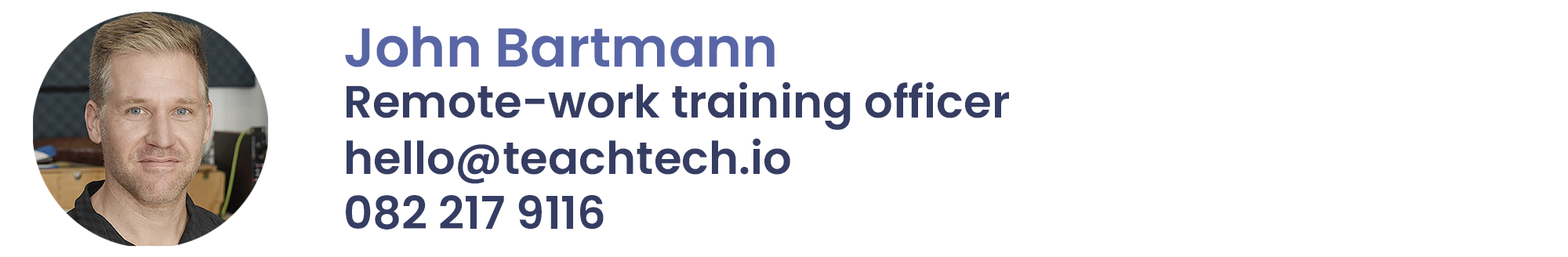
<style>
.page{position:relative;width:1568px;height:257px;background:#ffffff}
.page>*{position:absolute;margin:0}
.t1{font:77.6px/56.4px "Poppins-SemiBold";color:#363d63}
.t2{font:94.1px/56.4px "Poppins-SemiBold";color:#5966a6}
.t3{font:77.6px/54.9px "Poppins-SemiBold";color:#363d63}
</style>
<div class="page">
<p class="t1" style="left:345px;top:26px;width:664px;height:204px"><span class="t2">John Bartmann<br></span>Remote-work training officer<br>hello@teachtech.io<br><span class="t3">082 217 9116</span></p>
</div>
